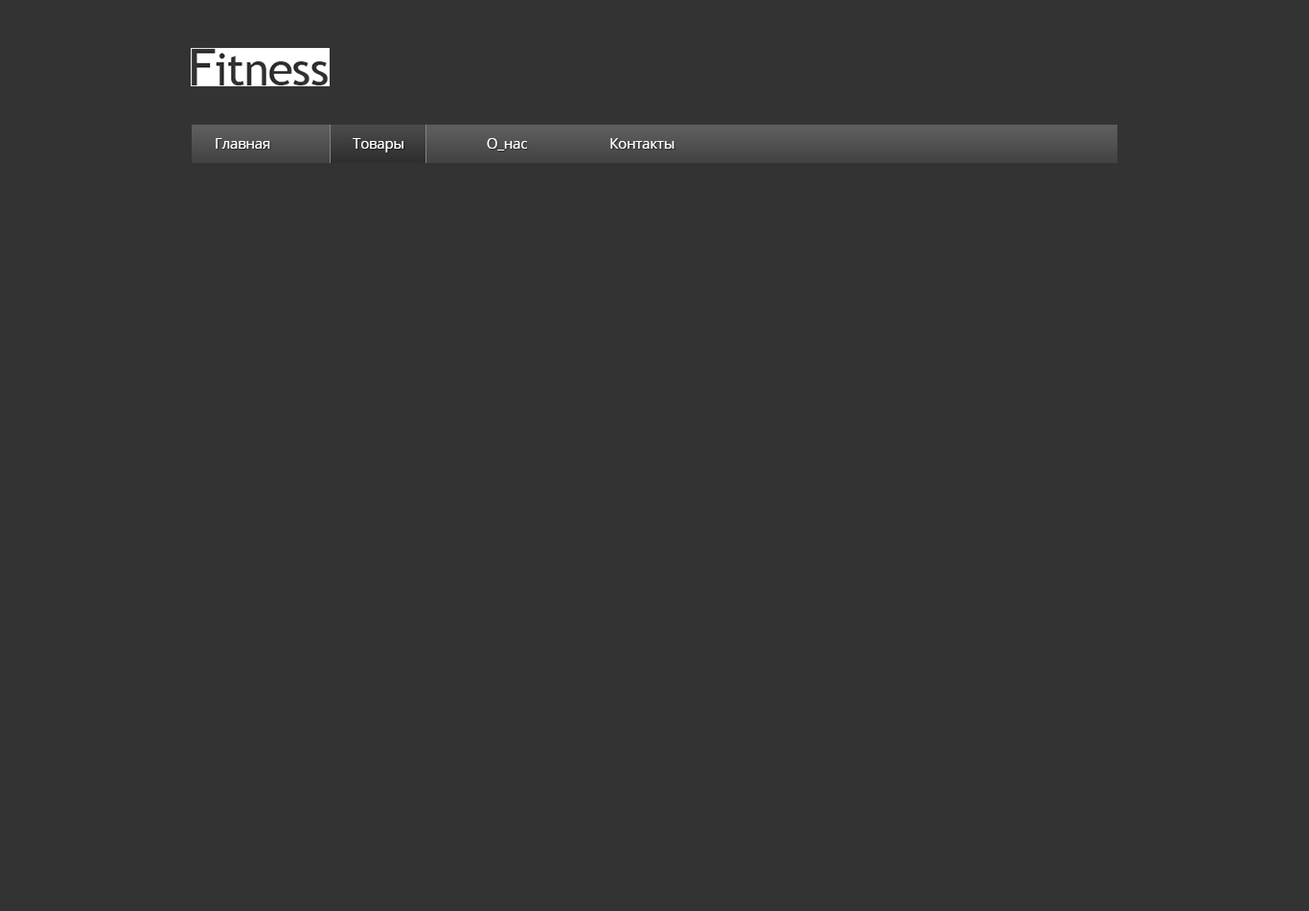
<style>
.page{position:relative;width:1309px;height:911px;background:#333333}
.page>*{position:absolute;margin:0}
.t1{font:14.1px "OpenSans";color:#ffffff}
</style>
<div class="page">
<p class="t1" style="left:216px;top:138px;width:459px;height:14px">Главная Товары О_нас Контакты</p>
</div>
